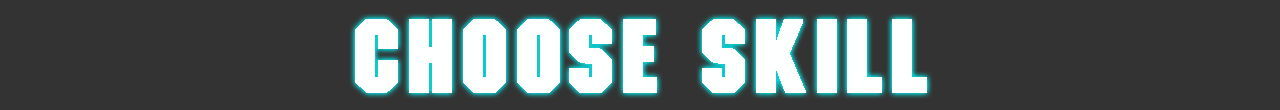
<style>
.page{position:relative;width:1280px;height:110px;background:#333333}
.page>*{position:absolute;margin:0}
.t1{font:100px "MotorPlain";letter-spacing:0.05em;color:#feffff;font-weight:bold}
</style>
<div class="page">
<p class="t1" style="left:355px;top:19px;width:572px;height:74px">choose skill</p>
</div>
